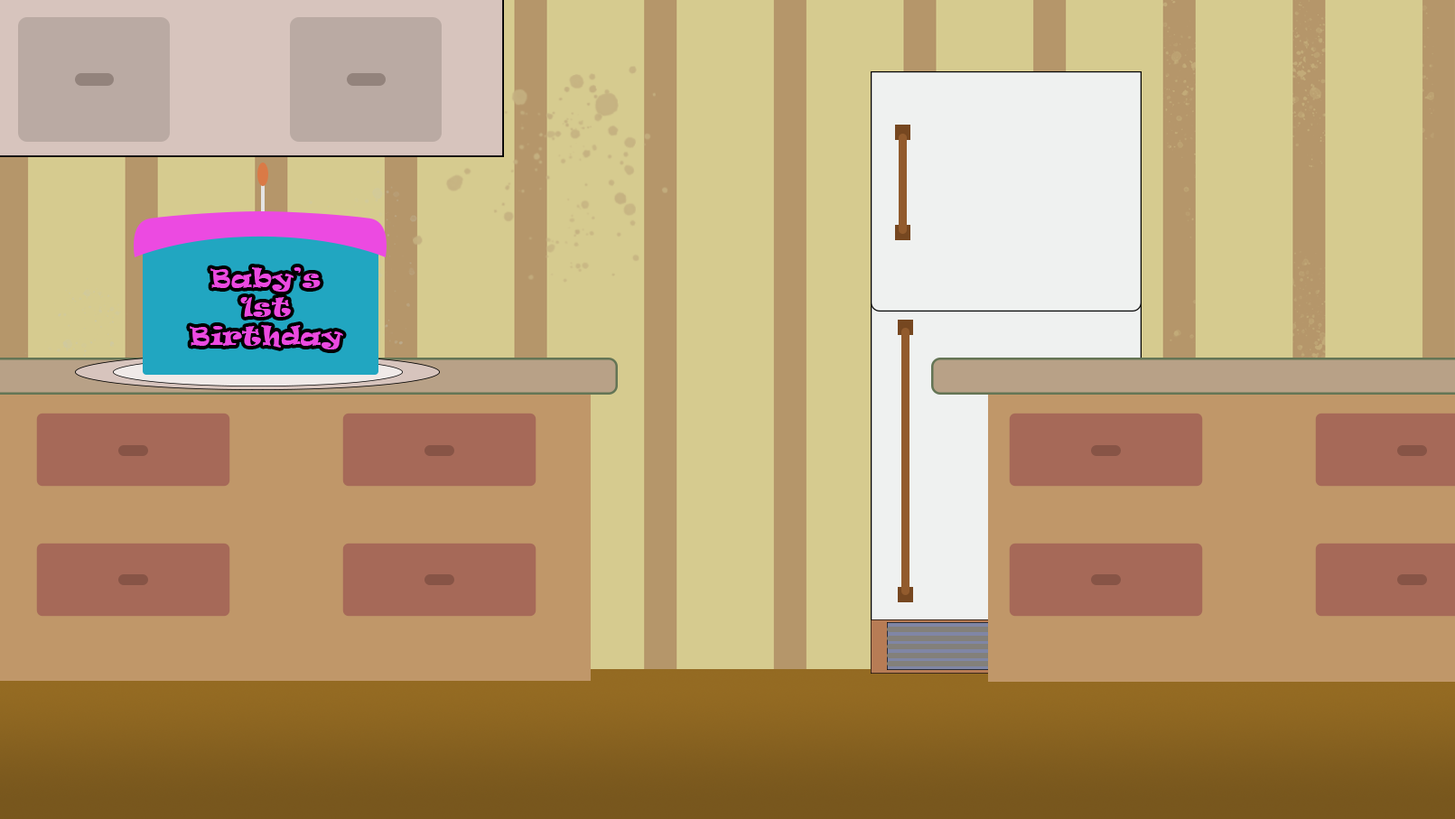
<style>
.page{position:relative;width:1455px;height:819px;background:#d6cb8f}
.page>*{position:absolute;margin:0}
.t1{font:24.4px "Ravie";letter-spacing:0.02em;color:#ec4ae1}
</style>
<div class="page">
<p class="t1" style="left:190px;top:267px;width:153px;height:83px;text-align:center">Baby’s<br>1st Birthday</p>
</div>
